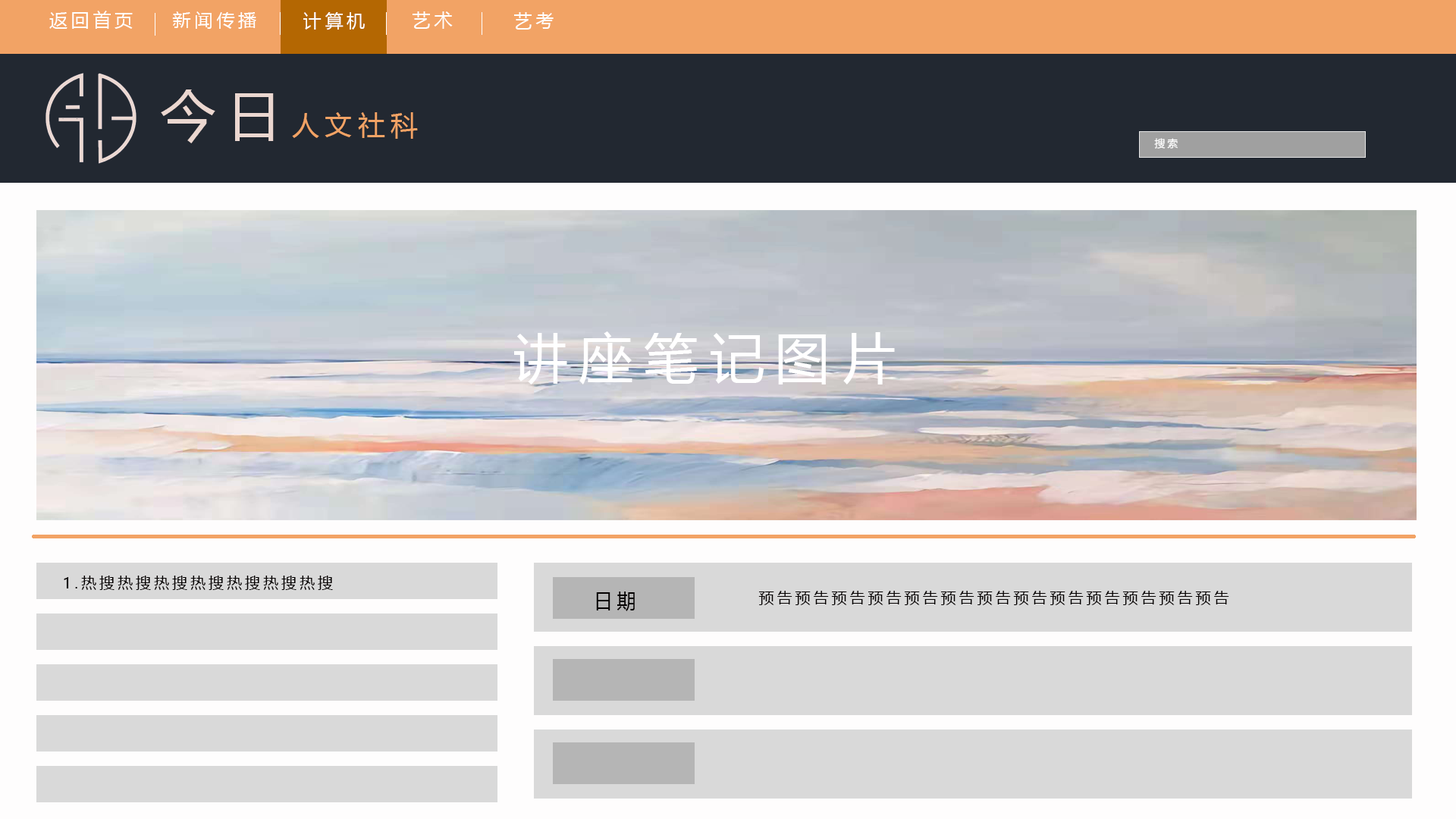
<style>
.page{position:relative;width:1456px;height:819px}
.page>*{position:absolute;margin:0}
.t1{font:18.2px "MicrosoftYaHei";letter-spacing:0.2em;color:#ffffff}
.t2{font:27.3px "MicrosoftYaHei";letter-spacing:0.2em;color:#f2a365}
.t3{font:54.6px "MicrosoftYaHei";letter-spacing:0.2em;color:#ebd7d0}
.t4{font:10.6px "MicrosoftYaHei";letter-spacing:0.2em;color:#ffffff}
.t5{font:54.6px "MicrosoftYaHei";letter-spacing:0.2em;color:#ffffff}
.t6{font:15.2px "MicrosoftYaHei";letter-spacing:0.2em;color:#040000}
.t7{font:21.2px "MicrosoftYaHei";letter-spacing:0.2em;color:#040000;scale:0.91 1}
</style>
<div class="page">
<p class="t1" style="left:49px;top:11px;width:84px;height:18px">返回首页</p>
<p class="t1" style="left:172px;top:11px;width:84px;height:18px">新闻传播</p>
<p class="t1" style="left:303px;top:12px;width:62px;height:18px">计算机</p>
<p class="t1" style="left:413px;top:11px;width:40px;height:18px">艺术</p>
<p class="t1" style="left:514px;top:12px;width:40px;height:18px">艺考</p>
<p class="t2" style="left:161px;top:89px;width:257px;height:54px"><span class="t3">今日</span>人文社科</p>
<p class="t4" style="left:1154px;top:138px;width:24px;height:11px">搜索</p>
<p class="t5" style="left:514px;top:331px;width:381px;height:53px">讲座笔记图片</p>
<p class="t6" style="left:64px;top:576px;width:269px;height:14px">1.热搜热搜热搜热搜热搜热搜热搜</p>
<p class="t7" style="left:596px;top:591px;width:39px;height:20px">日期</p>
<p class="t6" style="left:758px;top:591px;width:471px;height:14px">预告预告预告预告预告预告预告预告预告预告预告预告预告</p>
</div>
